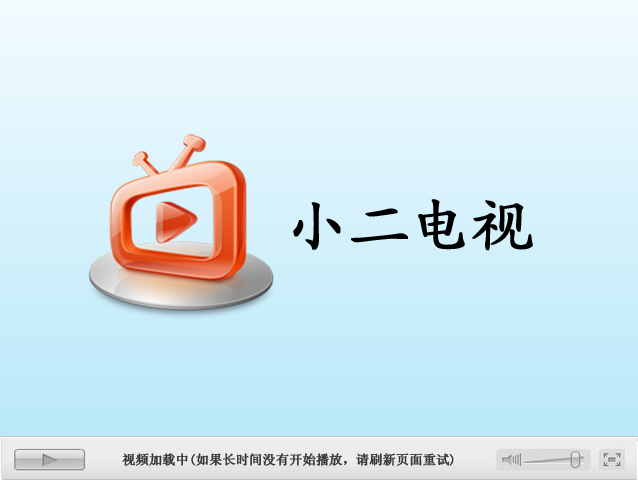
<style>
.page{position:relative;width:638px;height:480px}
.page>*{position:absolute;margin:0}
.t1{font:60px "KaiTi_GB2312";color:#000000;font-weight:bold}
.t2{font:13px "SimSun";color:#333333;font-weight:bold}
</style>
<div class="page">
<p class="t1" style="left:293px;top:199px;width:240px;height:52px">小二电视</p>
<p class="t2" style="left:122px;top:453px;width:332px;height:13px">视频加载中(如果长时间没有开始播放，请刷新页面重试)</p>
</div>
